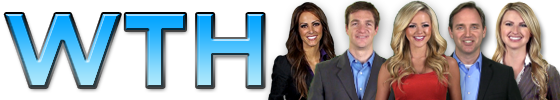
<style>
.page{position:relative;width:560px;height:100px;background:#ffffff}
.page>*{position:absolute;margin:0}
.t1{font:94px "TYPOGRAPHPRO-ExtraBold"}
</style>
<div class="page">
<p class="t1" style="left:5px;top:14px;width:259px;height:73px">WTH</p>
</div>
